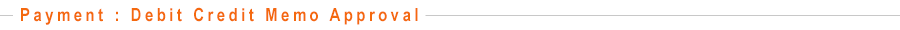
<style>
.page{position:relative;width:900px;height:30px;background:#ffffff}
.page>*{position:absolute;margin:0}
.t1{font:18px "ArialNarrow-Bold";letter-spacing:0.2em;color:#f4690e}
</style>
<div class="page">
<p class="t1" style="left:21px;top:7px;width:397px;height:18px">Payment : Debit Credit Memo Approval</p>
</div>
